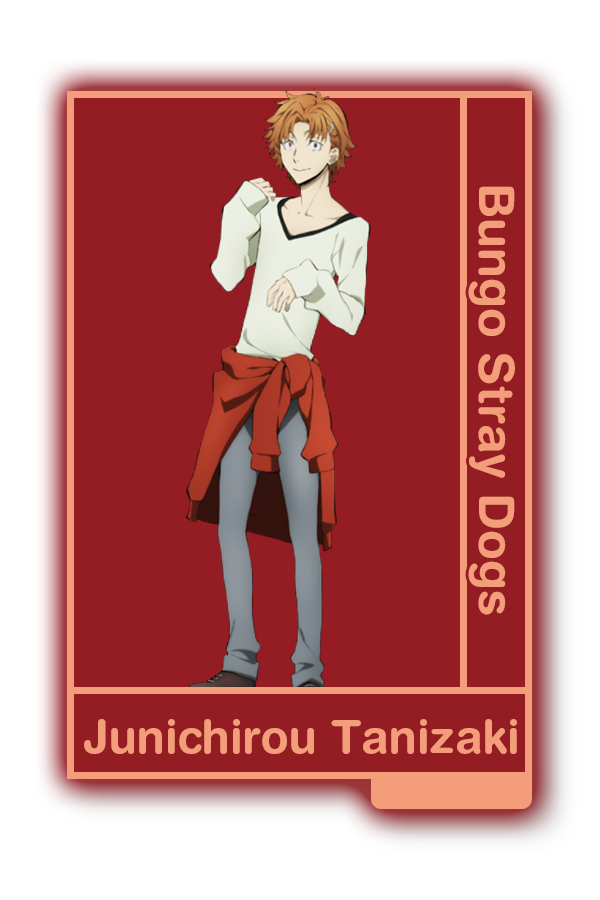
<style>
.page{position:relative;width:600px;height:900px;background:#941d23}
.page>*{position:absolute;margin:0}
.t1{font:48.8px "HelveticaRounded-Bold";color:#f39d7b}
.t2{font:45.6px "HelveticaRounded-Bold";color:#f39d7b}
</style>
<div class="page">
<p class="t1" style="left:468px;top:186px;width:47px;height:429px;rotate:90deg">Bungo Stray Dogs</p>
<p class="t2" style="left:84px;top:719px;width:433px;height:35px">Junichirou Tanizaki</p>
</div>
